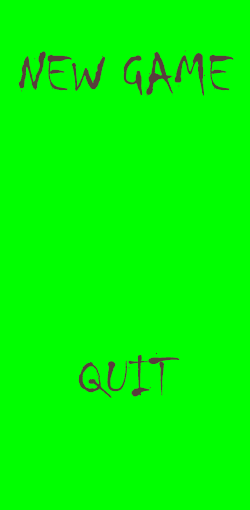
<style>
.page{position:relative;width:250px;height:510px;background:#00ff00}
.page>*{position:absolute;margin:0}
.t1{font:58.3px "Chiller-Regular";color:#593d3d}
</style>
<div class="page">
<p class="t1" style="left:18px;top:50px;width:216px;height:46px">NEW GAME</p>
<p class="t1" style="left:78px;top:352px;width:102px;height:46px">QUIT</p>
</div>
